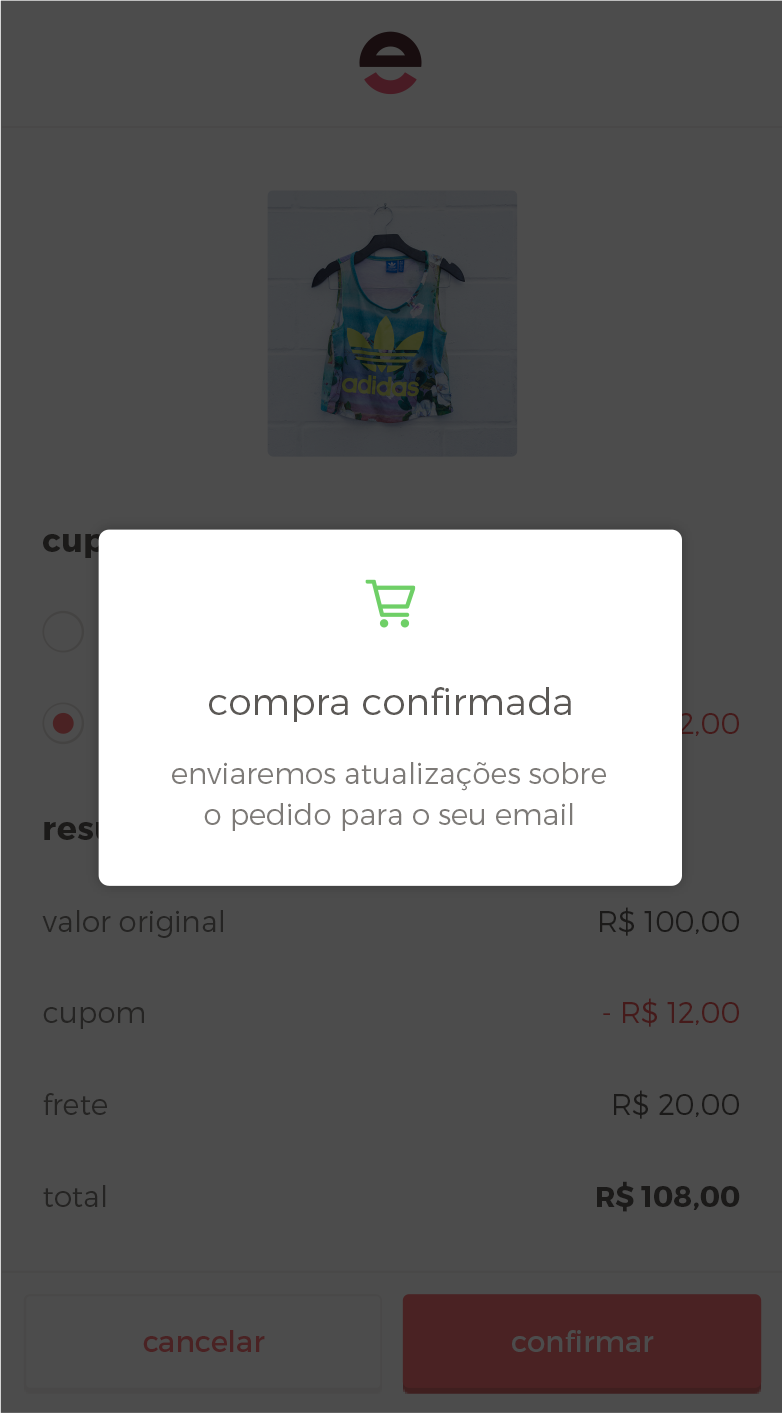
<style>
.page{position:relative;width:782px;height:1413px;background:#4c4c4c}
.page>*{position:absolute;margin:0}
.t1{font:37.5px "Montserrat-Light";color:#5b5855}
.t2{font:29.2px "Montserrat-Light";color:#7d7a77}
.t3{font:29.2px "Montserrat-Light";color:#252423}
.t4{font:29.2px "Montserrat-Light";color:#1b1a19}
.t5{font:29.2px "Montserrat-Light";color:#451a1a}
.t6{font:29.2px "Montserrat-Bold";color:#1b1a19}
.t7{font:29.2px "Montserrat-Regular";color:#4a2223}
.t8{font:29.2px "Montserrat-Regular";letter-spacing:-0.022em;color:#4a2223}
.t9{font:29.2px "Montserrat-Regular";letter-spacing:-0.021em;color:#4a2223}
.t10{font:29.2px "Montserrat-Regular";color:#4c4c4c}
.t11{font:29.2px "Montserrat-Regular";letter-spacing:-0.021em;color:#4c4c4c}
</style>
<div class="page">
<p class="t1" style="left:209px;top:687px;width:362px;height:35px">compra conﬁrmada</p>
<p class="t2" style="left:172px;top:762px;width:434px;height:29px">enviaremos atualizações sobre</p>
<p class="t2" style="left:204px;top:803px;width:369px;height:28px">o pedido para o seu email</p>
<p class="t3" style="left:42px;top:910px;width:181px;height:28px">valor original</p>
<p class="t4" style="left:600px;top:907px;width:139px;height:29px">R$ 100,00</p>
<p class="t5" style="left:603px;top:998px;width:136px;height:29px">- R$ 12,00</p>
<p class="t3" style="left:43px;top:1007px;width:101px;height:22px">cupom</p>
<p class="t3" style="left:43px;top:1093px;width:64px;height:22px">frete</p>
<p class="t4" style="left:614px;top:1090px;width:125px;height:29px">R$ 20,00</p>
<p class="t6" style="left:597px;top:1181px;width:143px;height:31px">R$ 108,00</p>
<p class="t3" style="left:43px;top:1185px;width:63px;height:22px">total</p>
<p class="t7" style="left:143px;top:1330px;width:122px;height:22px"><span class="t8">c</span>an<span class="t9">c</span>elar</p>
<p class="t10" style="left:512px;top:1330px;width:142px;height:22px"><span class="t11">c</span>onﬁrmar</p>
</div>
